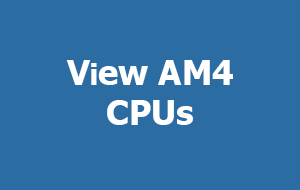
<style>
.page{position:relative;width:300px;height:190px;background:#2b6ca3}
.page>*{position:absolute;margin:0}
.t1{font:33.8px "Tahoma-Bold";color:#ffffff}
.t2{font:29px "Tahoma-Bold";color:#ffffff}
</style>
<div class="page">
<p class="t1" style="left:66px;top:60px;width:167px;height:65px;text-align:center">V<span class="t2">i</span>ew AM4<br>CPUs</p>
</div>
